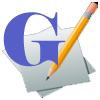
<style>
.page{position:relative;width:100px;height:100px;background:#ffffff}
.page>*{position:absolute;margin:0}
.t1{font:72px "Elephant-Regular";color:#565ec8}
</style>
<div class="page">
<p class="t1" style="left:3px;top:12px;width:63px;height:55px">G</p>
</div>
